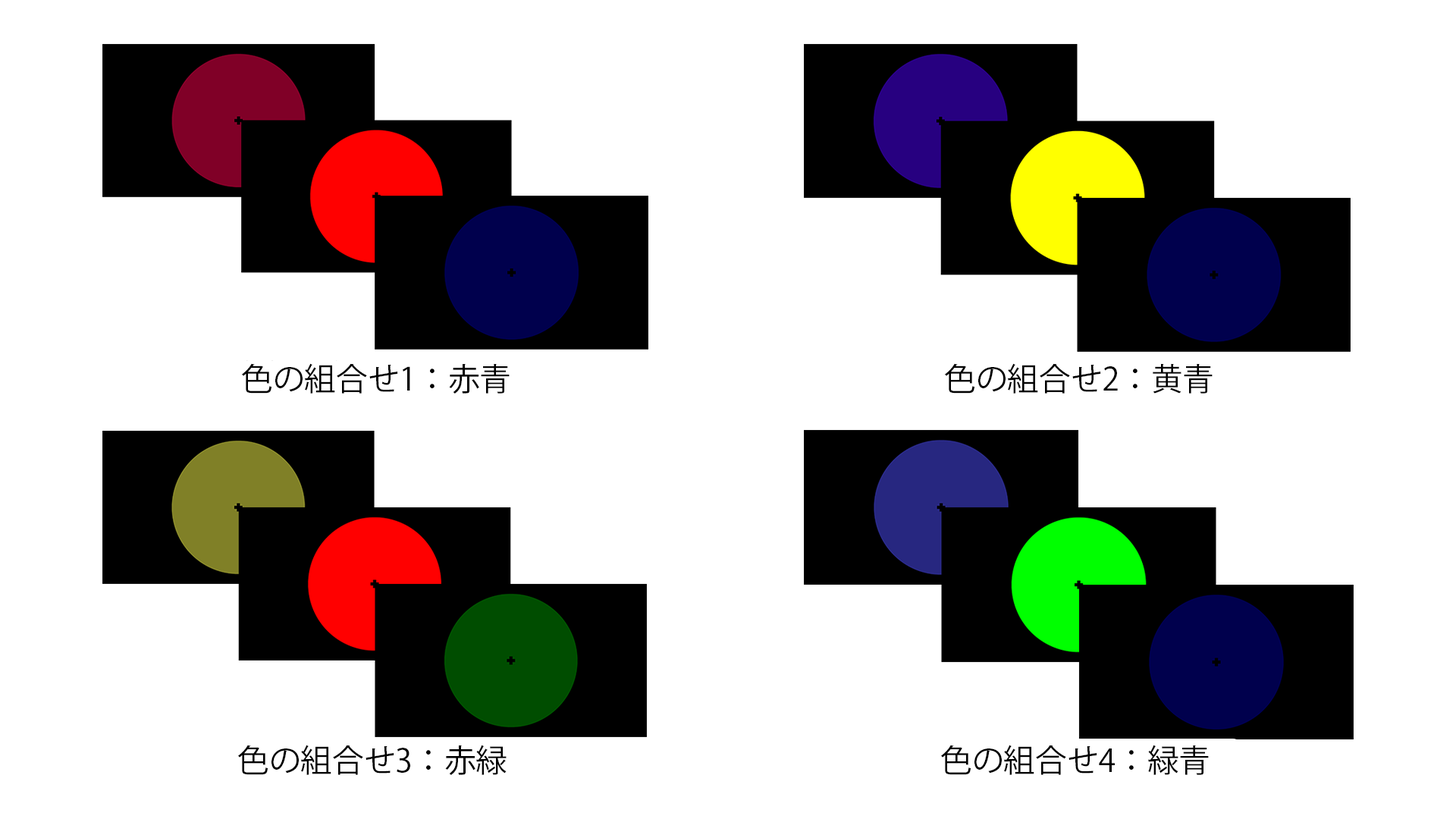
<style>
.page{position:relative;width:1456px;height:819px;background:#ffffff}
.page>*{position:absolute;margin:0}
.t1{font:31.6px "KozGoPr6N-Regular";color:#000000}
</style>
<div class="page">
<p class="t1" style="left:241px;top:363px;width:269px;height:31px">色の組合せ1：赤青</p>
<p class="t1" style="left:944px;top:363px;width:269px;height:31px">色の組合せ2：黄青</p>
<p class="t1" style="left:237px;top:745px;width:270px;height:30px">色の組合せ3：赤緑</p>
<p class="t1" style="left:940px;top:745px;width:269px;height:30px">色の組合せ4：緑青</p>
</div>
